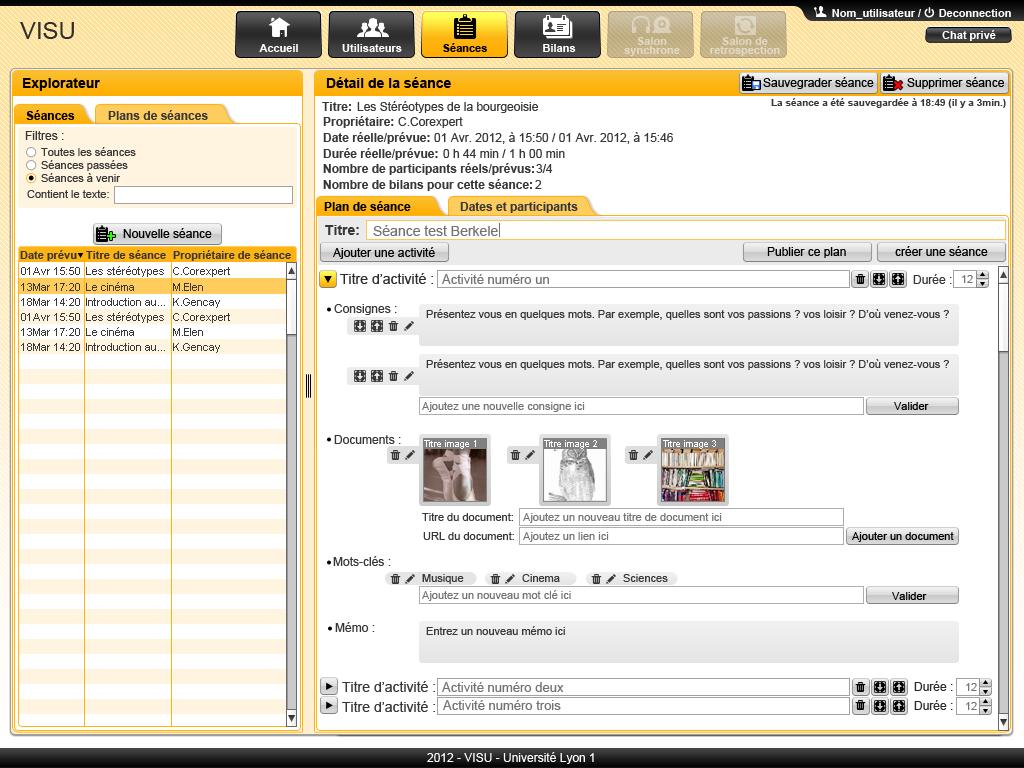
<style>
.page{position:relative;width:1024px;height:768px;background:#ffffff}
.page>*{position:absolute;margin:0}
.t1{font:11px "Arial-BoldMT";color:#ffffff}
.t2{font:24px "ArialMT";color:#2e2e2e}
.t3{font:11px/9px "Arial-BoldMT";color:#e3d8c2}
.t4{font:11px/9px "Arial-BoldMT";color:#e2d7c2}
.t5{font:11px "Arial-BoldMT";color:#000000}
.t6{font:14px "Arial-BoldMT";color:#000000}
.t7{font:12px "ArialMT";color:#000000}
.t8{font:19.3px "Arial-BoldMT";color:#ff0000}
.t9{font:12px "Arial-BoldMT";color:#373737}
.t10{font:12px "ArialMT";color:#373737}
.t11{font:10px "Arial-BoldMT";color:#373737}
.t12{font:12px "Arial-BoldMT";color:#000000}
.t13{font:11px "ArialMT";color:#373737}
.t14{font:14px "Arial-BoldMT";color:#24ff00}
.t15{font:14px "Arial-BoldMT";color:#373737}
.t16{font:14px "ArialMT";color:#737373}
.t17{font:11px "Arial-BoldMT";color:#373737}
.t18{font:14px "ArialMT";color:#2b2b2b}
.t19{font:13px "ArialMT";color:#737373}
.t20{font:11px "ArialMT";color:#737373}
.t21{font:11px "ArialMT";color:#000000}
.t22{font:9px "ArialMT";color:#ffffff}
.t23{font:14px "ArialMT";color:#373737}
.t24{font:12px "ArialMT";color:#2b2b2b}
.t25{font:12px "ArialMT";color:#fefefe}
</style>
<div class="page">
<p class="t1" style="left:832px;top:9px;width:89px;height:10px">Nom_utilisateur /</p>
<p class="t1" style="left:939px;top:9px;width:72px;height:8px">Deconnection</p>
<p class="t2" style="left:20px;top:22px;width:54px;height:17px">VISU</p>
<p class="t1" style="left:942px;top:30px;width:54px;height:11px">Chat privé</p>
<p class="t3" style="left:624px;top:37px;width:56px;height:19px;text-align:center">Salon<br>synchrone</p>
<p class="t4" style="left:710px;top:37px;width:70px;height:19px;text-align:center">Salon de<br>retrospection</p>
<p class="t1" style="left:259px;top:44px;width:39px;height:8px">Accueil</p>
<p class="t1" style="left:342px;top:44px;width:60px;height:8px">Utilisateurs</p>
<p class="t5" style="left:443px;top:43px;width:44px;height:9px">Séances</p>
<p class="t1" style="left:543px;top:44px;width:33px;height:8px">Bilans</p>
<p class="t6" style="left:23px;top:78px;width:77px;height:13px">Explorateur</p>
<p class="t6" style="left:326px;top:77px;width:125px;height:11px">Détail de la séance</p>
<p class="t7" style="left:763px;top:77px;width:111px;height:12px">Sauvegrader séance</p>
<p class="t7" style="left:907px;top:77px;width:97px;height:12px">Supprimer séance</p>
<p class="t8" style="left:893px;top:81px;width:10px;height:9px;rotate:-45deg">+</p>
<p class="t9" style="left:322px;top:102px;width:29px;height:9px">Titre:</p>
<p class="t10" style="left:357px;top:101px;width:181px;height:12px">Les Stéréotypes de la bourgeoisie</p>
<p class="t11" style="left:771px;top:98px;width:235px;height:10px">La séance a été sauvegardée à 18:49 (il y a 3min.)</p>
<p class="t12" style="left:26px;top:110px;width:49px;height:10px">Séances</p>
<p class="t9" style="left:108px;top:110px;width:100px;height:10px">Plans de séances</p>
<p class="t9" style="left:323px;top:116px;width:71px;height:12px">Propriétaire:</p>
<p class="t10" style="left:398px;top:117px;width:65px;height:11px">C.Corexpert</p>
<p class="t10" style="left:25px;top:131px;width:39px;height:9px">Filtres :</p>
<p class="t9" style="left:323px;top:132px;width:107px;height:12px">Date réelle/prévue:</p>
<p class="t10" style="left:434px;top:132px;width:239px;height:12px">01 Avr. 2012, à 15:50 / 01 Avr. 2012, à 15:46</p>
<p class="t13" style="left:41px;top:147px;width:95px;height:9px">Toutes les séances</p>
<p class="t9" style="left:323px;top:148px;width:115px;height:12px">Durée réelle/prévue:</p>
<p class="t10" style="left:443px;top:149px;width:122px;height:9px">0 h 44 min / 1 h 00 min</p>
<p class="t13" style="left:41px;top:160px;width:87px;height:11px">Séances passées</p>
<p class="t13" style="left:41px;top:173px;width:80px;height:9px">Séances à venir</p>
<p class="t9" style="left:323px;top:163px;width:211px;height:12px">Nombre de participants réels/prévus:</p>
<p class="t10" style="left:536px;top:164px;width:17px;height:9px">3/4</p>
<p class="t9" style="left:323px;top:179px;width:209px;height:12px">Nombre de bilans pour cette séance:</p>
<p class="t10" style="left:535px;top:180px;width:7px;height:9px">2</p>
<p class="t13" style="left:27px;top:190px;width:82px;height:8px">Contient le texte:</p>
<p class="t12" style="left:324px;top:201px;width:87px;height:10px">Plan de séance</p>
<p class="t9" style="left:460px;top:202px;width:118px;height:11px">Dates et participants</p>
<p class="t14" style="left:107px;top:232px;width:8px;height:8px">+</p>
<p class="t7" style="left:123px;top:228px;width:89px;height:10px">Nouvelle séance</p>
<p class="t15" style="left:325px;top:225px;width:34px;height:10px">Titre:</p>
<p class="t16" style="left:373px;top:225px;width:125px;height:11px">Séance test Berkele</p>
<p class="t7" style="left:895px;top:246px;width:93px;height:10px">créer une séance</p>
<p class="t17" style="left:20px;top:250px;width:57px;height:11px">Date prévu</p>
<p class="t17" style="left:86px;top:250px;width:80px;height:9px">Titre de séance</p>
<p class="t17" style="left:173px;top:250px;width:118px;height:11px">Propriétaire de séance</p>
<p class="t7" style="left:333px;top:247px;width:102px;height:12px">Ajouter une activité</p>
<p class="t7" style="left:767px;top:247px;width:79px;height:11px">Publier ce plan</p>
<p class="t13" style="left:21px;top:267px;width:59px;height:8px">01Avr 15:50</p>
<p class="t13" style="left:86px;top:266px;width:78px;height:11px">Les stéréotypes</p>
<p class="t13" style="left:173px;top:267px;width:57px;height:10px">C.Corexpert</p>
<p class="t18" style="left:340px;top:273px;width:93px;height:11px">Titre d’activité :</p>
<p class="t19" style="left:442px;top:274px;width:107px;height:10px">Activité numéro un</p>
<p class="t10" style="left:913px;top:274px;width:39px;height:10px">Durée :</p>
<p class="t20" style="left:962px;top:275px;width:11px;height:8px">12</p>
<p class="t13" style="left:21px;top:283px;width:59px;height:8px">13Mar 17:20</p>
<p class="t13" style="left:86px;top:282px;width:48px;height:9px">Le cinéma</p>
<p class="t13" style="left:173px;top:283px;width:30px;height:8px">M.Elen</p>
<p class="t13" style="left:21px;top:298px;width:59px;height:8px">18Mar 14:20</p>
<p class="t13" style="left:86px;top:298px;width:79px;height:8px">Introduction au...</p>
<p class="t13" style="left:173px;top:298px;width:47px;height:10px">K.Gencay</p>
<p class="t10" style="left:334px;top:304px;width:63px;height:11px">Consignes :</p>
<p class="t13" style="left:21px;top:313px;width:59px;height:8px">01Avr 15:50</p>
<p class="t13" style="left:86px;top:312px;width:78px;height:11px">Les stéréotypes</p>
<p class="t13" style="left:173px;top:313px;width:57px;height:10px">C.Corexpert</p>
<p class="t13" style="left:426px;top:309px;width:523px;height:11px">Présentez vous en quelques mots. Par exemple, quelles sont vos passions ? vos loisir ? D’où venez-vous ?</p>
<p class="t13" style="left:21px;top:328px;width:59px;height:8px">13Mar 17:20</p>
<p class="t13" style="left:86px;top:327px;width:48px;height:9px">Le cinéma</p>
<p class="t13" style="left:173px;top:328px;width:30px;height:8px">M.Elen</p>
<p class="t13" style="left:21px;top:343px;width:59px;height:8px">18Mar 14:20</p>
<p class="t13" style="left:86px;top:343px;width:79px;height:8px">Introduction au...</p>
<p class="t13" style="left:173px;top:343px;width:47px;height:10px">K.Gencay</p>
<p class="t13" style="left:426px;top:359px;width:523px;height:11px">Présentez vous en quelques mots. Par exemple, quelles sont vos passions ? vos loisir ? D’où venez-vous ?</p>
<p class="t20" style="left:422px;top:402px;width:163px;height:10px">Ajoutez une nouvelle consigne ici</p>
<p class="t21" style="left:894px;top:402px;width:35px;height:8px">Valider</p>
<p class="t10" style="left:334px;top:435px;width:67px;height:9px">Documents :</p>
<p class="t22" style="left:424px;top:440px;width:52px;height:9px">Titre image 1</p>
<p class="t22" style="left:544px;top:440px;width:53px;height:9px">Titre image 2</p>
<p class="t22" style="left:663px;top:440px;width:53px;height:9px">Titre image 3</p>
<p class="t13" style="left:422px;top:513px;width:91px;height:8px">Titre du document:</p>
<p class="t20" style="left:523px;top:513px;width:199px;height:10px">Ajoutez un nouveau titre de document ici</p>
<p class="t13" style="left:423px;top:532px;width:91px;height:8px">URL du document:</p>
<p class="t20" style="left:523px;top:532px;width:86px;height:10px">Ajoutez un lien ici</p>
<p class="t21" style="left:852px;top:532px;width:102px;height:10px">Ajouter un document</p>
<p class="t10" style="left:333px;top:556px;width:58px;height:10px">Mots-clés :</p>
<p class="t13" style="left:422px;top:574px;width:42px;height:10px">Musique</p>
<p class="t13" style="left:522px;top:574px;width:38px;height:8px">Cinema</p>
<p class="t13" style="left:623px;top:574px;width:45px;height:8px">Sciences</p>
<p class="t20" style="left:422px;top:590px;width:149px;height:11px">Ajoutez un nouveau mot clé ici</p>
<p class="t21" style="left:892px;top:592px;width:35px;height:8px">Valider</p>
<p class="t10" style="left:335px;top:622px;width:40px;height:10px">Mémo :</p>
<p class="t13" style="left:426px;top:626px;width:139px;height:9px">Entrez un nouveau mémo ici</p>
<p class="t23" style="left:342px;top:681px;width:93px;height:11px">Titre d’activité :</p>
<p class="t19" style="left:442px;top:682px;width:122px;height:10px">Activité numéro deux</p>
<p class="t24" style="left:914px;top:681px;width:39px;height:10px">Durée :</p>
<p class="t20" style="left:966px;top:683px;width:11px;height:8px">12</p>
<p class="t23" style="left:342px;top:701px;width:93px;height:11px">Titre d’activité :</p>
<p class="t19" style="left:443px;top:700px;width:118px;height:10px">Activité numéro trois</p>
<p class="t24" style="left:914px;top:700px;width:39px;height:10px">Durée :</p>
<p class="t20" style="left:966px;top:702px;width:11px;height:8px">12</p>
<p class="t25" style="left:427px;top:752px;width:167px;height:12px">2012 - VISU - Université Lyon 1</p>
</div>
